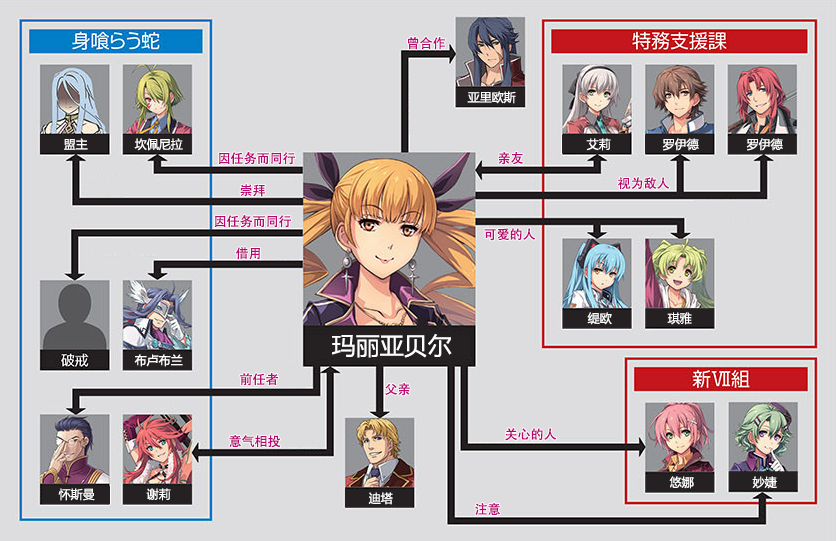
<style>
.page{position:relative;width:836px;height:541px;background:#dddddf}
.page>*{position:absolute;margin:0}
.t1{font:13px "AdobeHeitiStd-Regular";color:#b70773}
.t2{font:12px "MicrosoftYaHei";color:#ffffff}
.t3{font:24px "MicrosoftYaHei";color:#ffffff}
</style>
<div class="page">
<p class="t1" style="left:408px;top:37px;width:37px;height:13px">曾合作</p>
<p class="t2" style="left:467px;top:91px;width:49px;height:13px">亚里欧斯</p>
<p class="t2" style="left:64px;top:138px;width:24px;height:12px">盟主</p>
<p class="t2" style="left:134px;top:138px;width:49px;height:13px">坎佩尼拉</p>
<p class="t2" style="left:586px;top:138px;width:25px;height:13px">艾莉</p>
<p class="t2" style="left:662px;top:138px;width:37px;height:13px">罗伊德</p>
<p class="t2" style="left:746px;top:138px;width:37px;height:13px">罗伊德</p>
<p class="t1" style="left:219px;top:152px;width:76px;height:13px">因任务而同行</p>
<p class="t1" style="left:498px;top:152px;width:25px;height:13px">亲友</p>
<p class="t1" style="left:240px;top:184px;width:25px;height:13px">崇拜</p>
<p class="t1" style="left:618px;top:177px;width:52px;height:13px">视为敌人</p>
<p class="t1" style="left:215px;top:215px;width:76px;height:13px">因任务而同行</p>
<p class="t1" style="left:484px;top:228px;width:52px;height:13px">可爱的人</p>
<p class="t1" style="left:236px;top:247px;width:24px;height:13px">借用</p>
<p class="t2" style="left:587px;top:312px;width:25px;height:13px">缇欧</p>
<p class="t2" style="left:667px;top:312px;width:25px;height:13px">琪雅</p>
<p class="t3" style="left:332px;top:334px;width:120px;height:24px">玛丽亚贝尔</p>
<p class="t2" style="left:134px;top:354px;width:49px;height:13px">布卢布兰</p>
<p class="t1" style="left:240px;top:373px;width:38px;height:13px">前任者</p>
<p class="t1" style="left:385px;top:383px;width:25px;height:13px">父亲</p>
<p class="t1" style="left:229px;top:435px;width:52px;height:13px">意气相投</p>
<p class="t1" style="left:505px;top:428px;width:52px;height:13px">关心的人</p>
<p class="t2" style="left:669px;top:476px;width:25px;height:13px">悠娜</p>
<p class="t2" style="left:752px;top:476px;width:25px;height:13px">妙婕</p>
<p class="t2" style="left:58px;top:488px;width:37px;height:13px">怀斯曼</p>
<p class="t2" style="left:146px;top:488px;width:25px;height:13px">谢莉</p>
<p class="t2" style="left:368px;top:492px;width:25px;height:13px">迪塔</p>
<p class="t1" style="left:475px;top:503px;width:25px;height:12px">注意</p>
</div>
